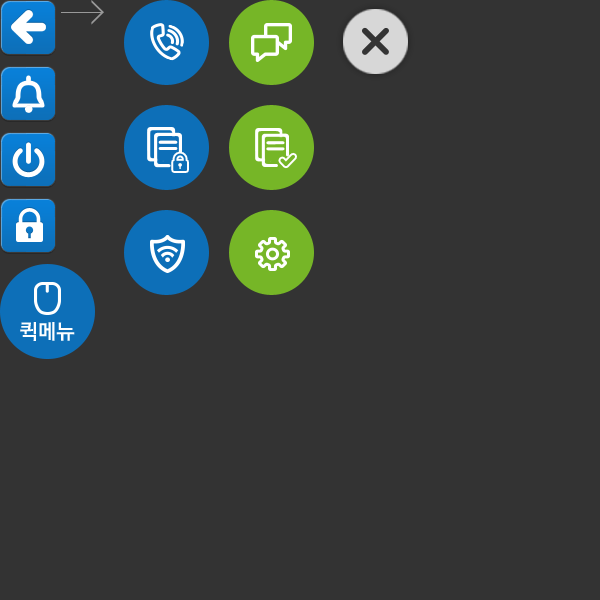
<style>
.page{position:relative;width:600px;height:600px;background:#333333}
.page>*{position:absolute;margin:0}
.t1{font:21px "RixMGoB";letter-spacing:-0.02em;color:#ffffff}
</style>
<div class="page">
<p class="t1" style="left:20px;top:322px;width:55px;height:19px">퀵메뉴</p>
</div>
